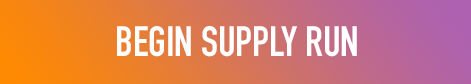
<style>
.page{position:relative;width:471px;height:84px}
.page>*{position:absolute;margin:0}
.t1{font:41.7px "DINCondensed-Bold";color:#ffffff}
</style>
<div class="page">
<p class="t1" style="left:117px;top:26px;width:240px;height:31px">BEGIN SUPPLY RUN</p>
</div>
